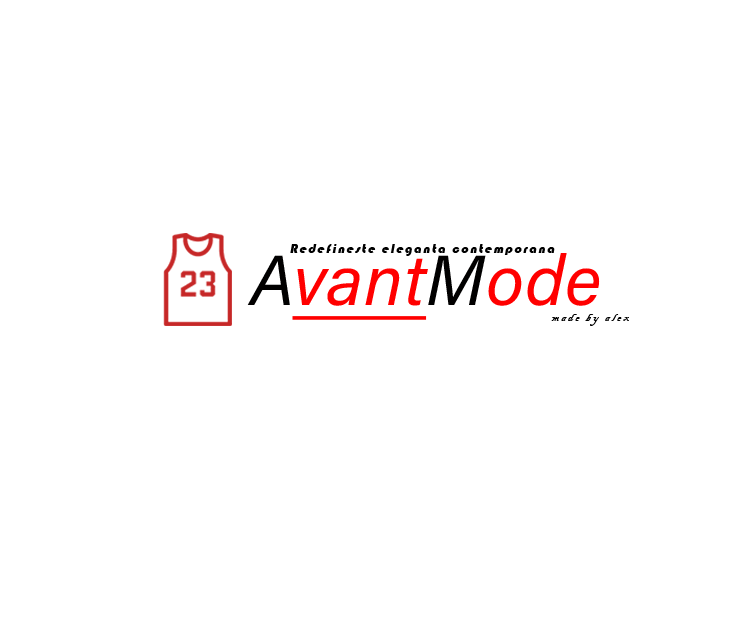
<style>
.page{position:relative;width:730px;height:635px;background:#ffffff}
.page>*{position:absolute;margin:0}
.t1{font:12.5px "Bauhaus93";letter-spacing:0.15em;color:#000000;font-style:italic}
.t2{font:70.8px "AcuminConcept-Italic";letter-spacing:0.01em;color:#ff0000;font-weight:bold;text-decoration:underline}
.t3{font:70.8px "AcuminConcept-Italic";letter-spacing:0.01em;color:#010000;font-weight:bold}
.t4{font:70.8px "AcuminConcept-Italic";letter-spacing:0.01em;color:#ff0000;font-weight:bold}
.t5{font:12.5px "BlackadderITC-Regular";letter-spacing:0.19em;color:#000000;font-style:italic}
</style>
<div class="page">
<p class="t1" style="left:290px;top:244px;width:265px;height:12px">Redefineste eleganta contemporana</p>
<p class="t2" style="left:247px;top:253px;width:353px;height:67px"><span class="t3">A</span>vant<span class="t3">M</span><span class="t4">ode</span></p>
<p class="t5" style="left:551px;top:314px;width:78px;height:12px">made by alex</p>
</div>
